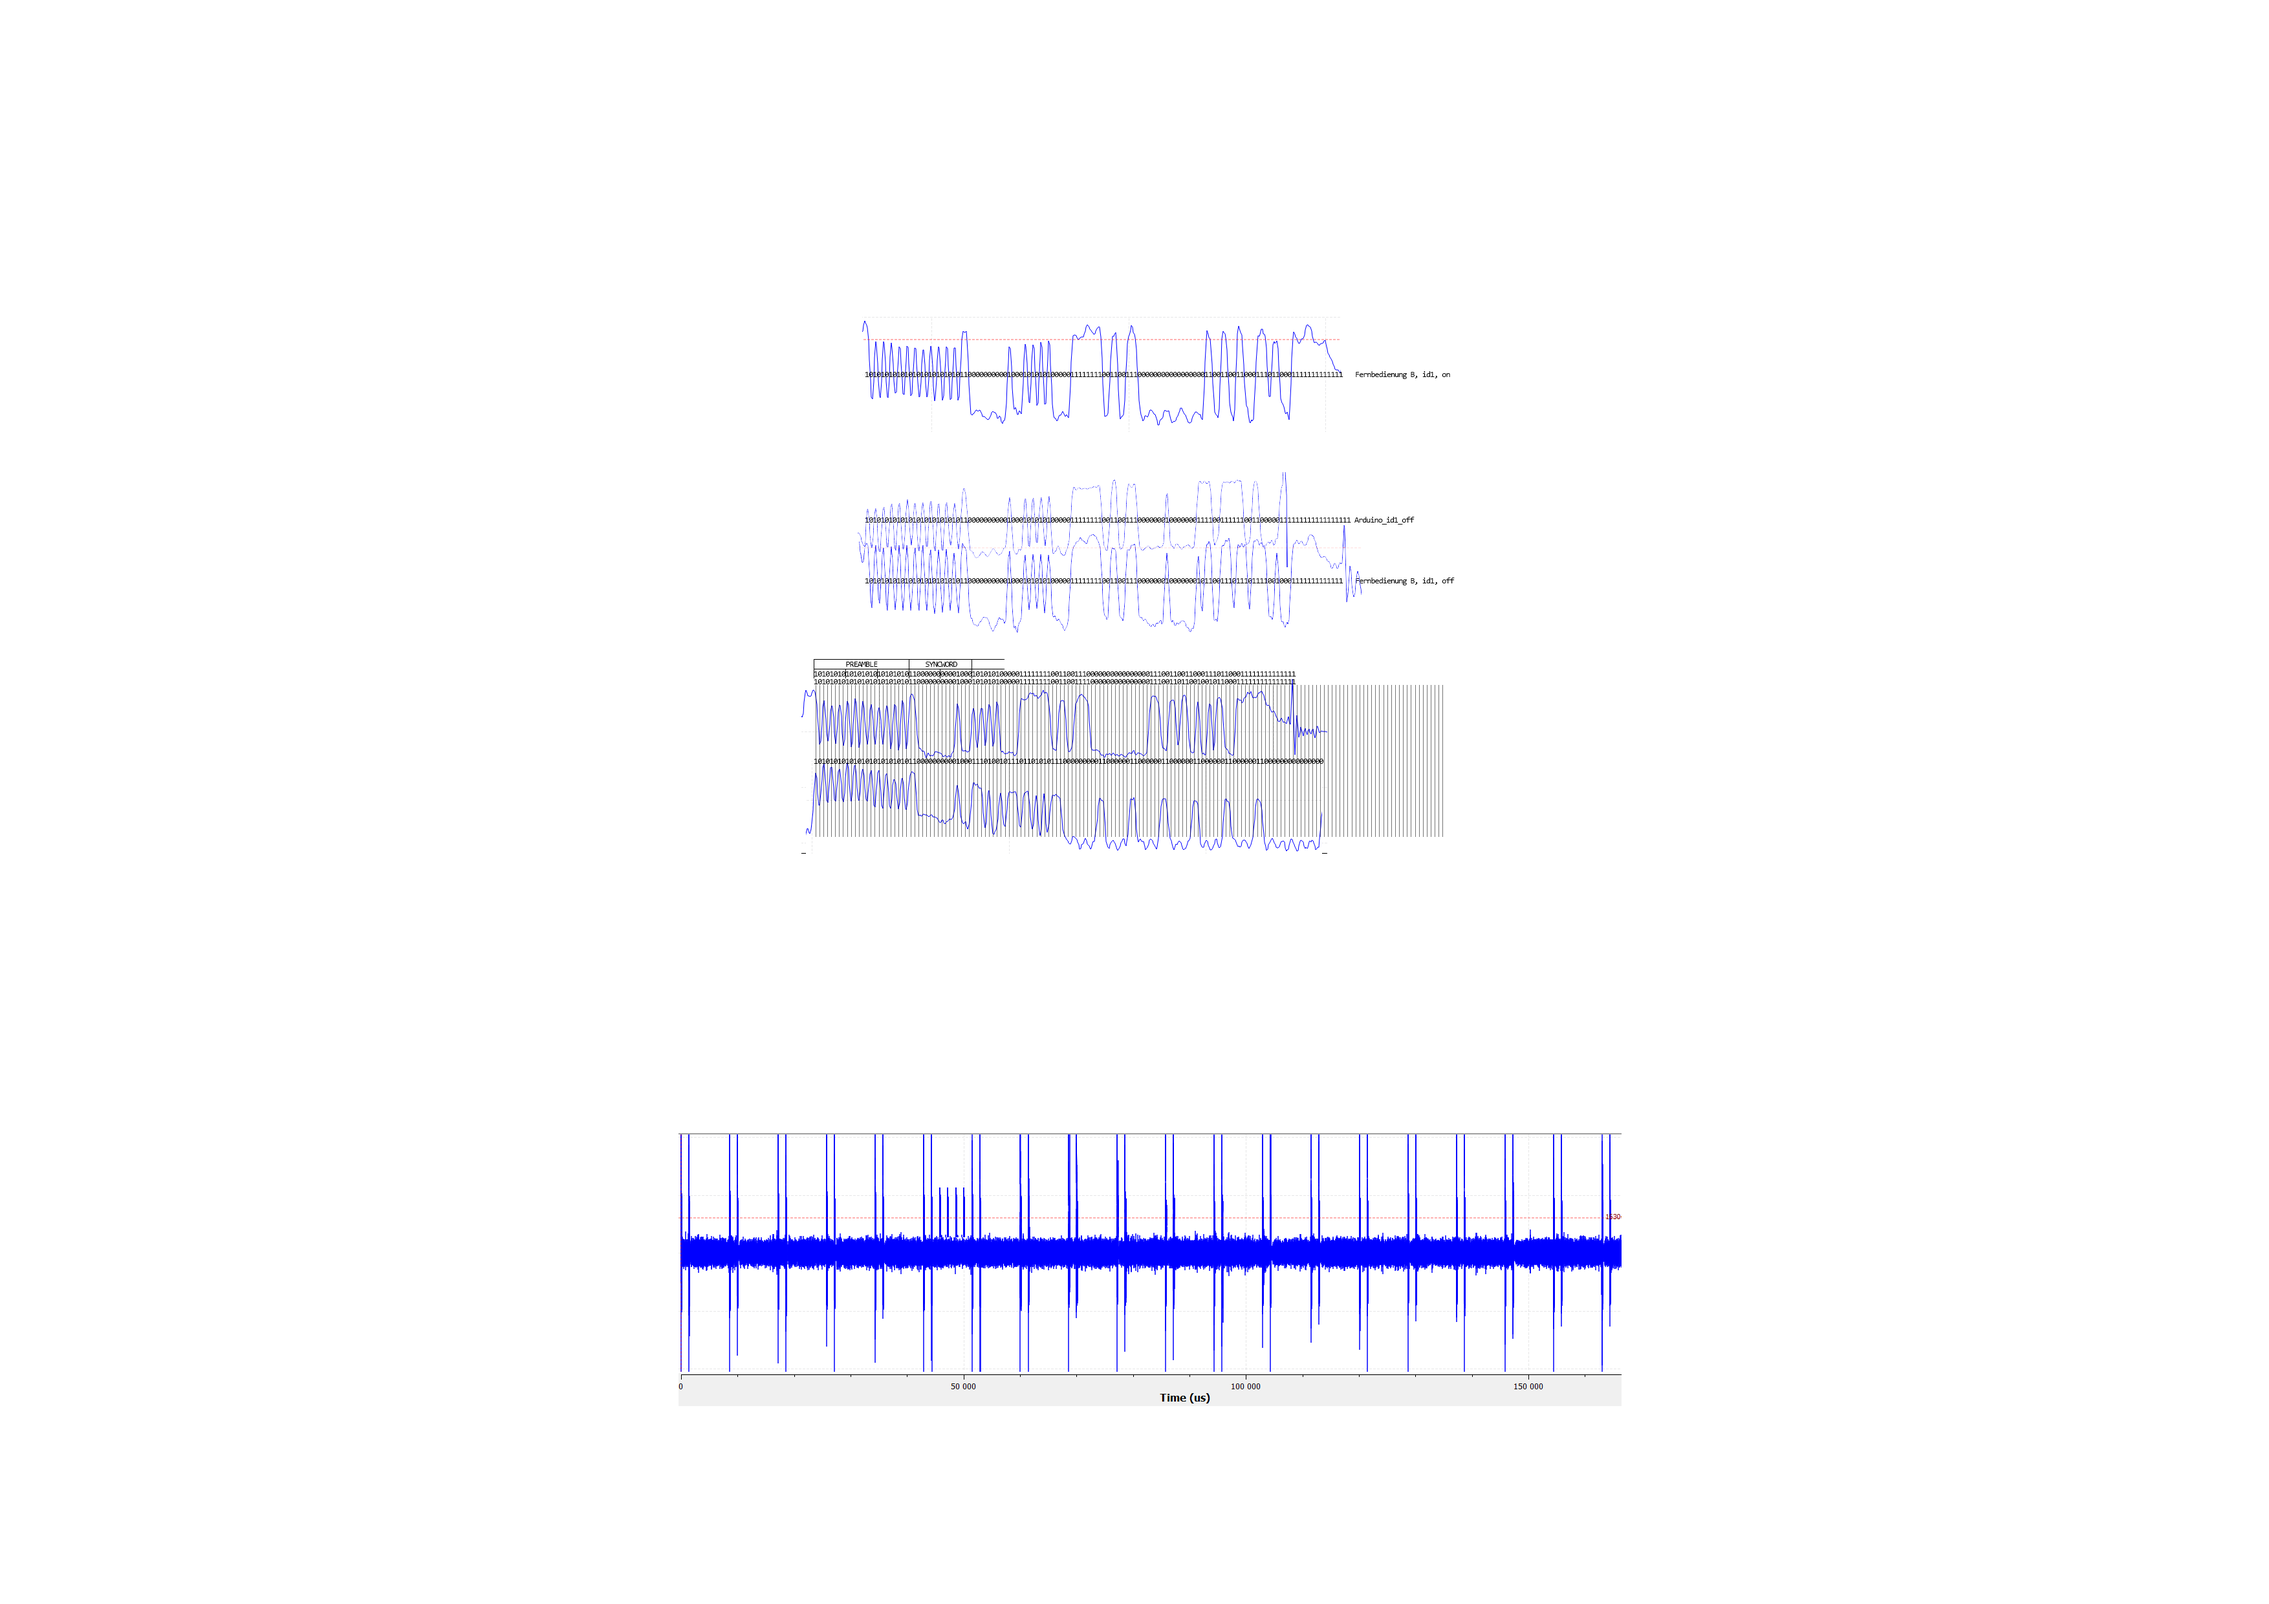
<style>
.page{position:relative;width:2269px;height:1604px;background:#ffffff}
.page>*{position:absolute;margin:0}
.t1{font:8.1px "Consolas";letter-spacing:-0.063em;color:#000000}
</style>
<div class="page">
<p class="t1" style="left:865px;top:372px;width:478px;height:5px">1010101010101010101010101100000000001000101010100000111111110011001110000000000000000011001100110001110110001111111111111</p>
<p class="t1" style="left:1355px;top:371px;width:95px;height:8px">Fernbedienung B, id1, on</p>
<p class="t1" style="left:865px;top:517px;width:486px;height:6px">101010101010101010101010110000000000100010101010000011111111001100111000000010000000111100111111001100000111111111111111111</p>
<p class="t1" style="left:1354px;top:517px;width:60px;height:7px">Arduino_id1_off</p>
<p class="t1" style="left:865px;top:578px;width:478px;height:5px">1010101010101010101010101100000000001000101010100000111111110011001110000000100000001011001110111011110010001111111111111</p>
<p class="t1" style="left:1355px;top:577px;width:99px;height:8px">Fernbedienung B, id1, off</p>
<p class="t1" style="left:846px;top:662px;width:32px;height:5px">PREAMBLE</p>
<p class="t1" style="left:925px;top:662px;width:32px;height:5px">SYNCWORD</p>
<p class="t1" style="left:814px;top:671px;width:482px;height:5px">10101010101010101010101011000000000010001010101000001111111100110011100000000000000001110011001100011101100011111111111111</p>
<p class="t1" style="left:814px;top:679px;width:482px;height:5px">10101010101010101010101011000000000010001010101000001111111100110011110000000000000001110011011001001011000111111111111111</p>
<p class="t1" style="left:814px;top:759px;width:510px;height:5px">101010101010101010101010110000000000100011101001011101101010111000000000110000001100000011000000110000001100000011000000000000000</p>
</div>
